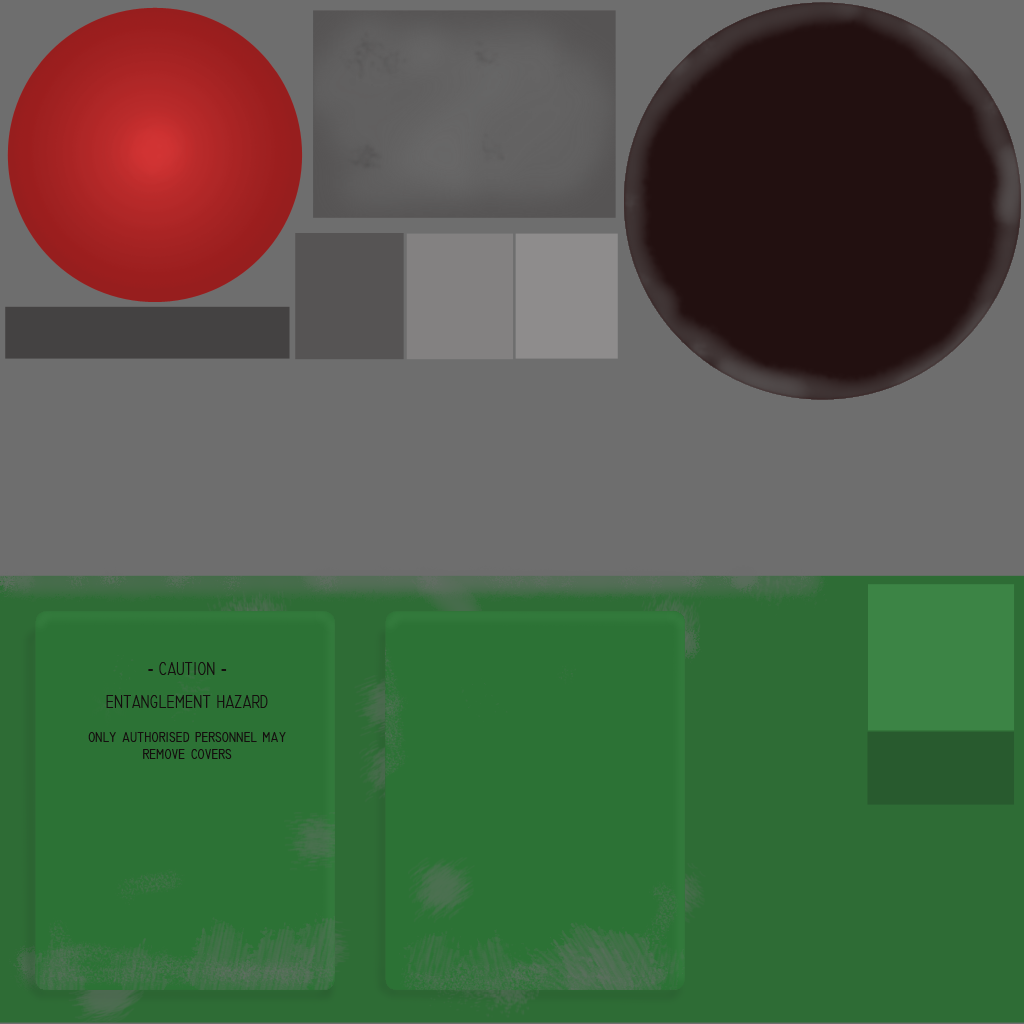
<style>
.page{position:relative;width:1024px;height:1024px;background:#6e6e6e}
.page>*{position:absolute;margin:0}
.t1{font:18.2px "Technic";color:#140e0e;scale:0.77 1}
</style>
<div class="page">
<p class="t1" style="left:88px;top:662px;width:198px;height:97px;text-align:center">- CAUTION -<br><br>ENTANGLEMENT HAZARD<br><br>only authorised personnel may remove covers</p>
</div>
